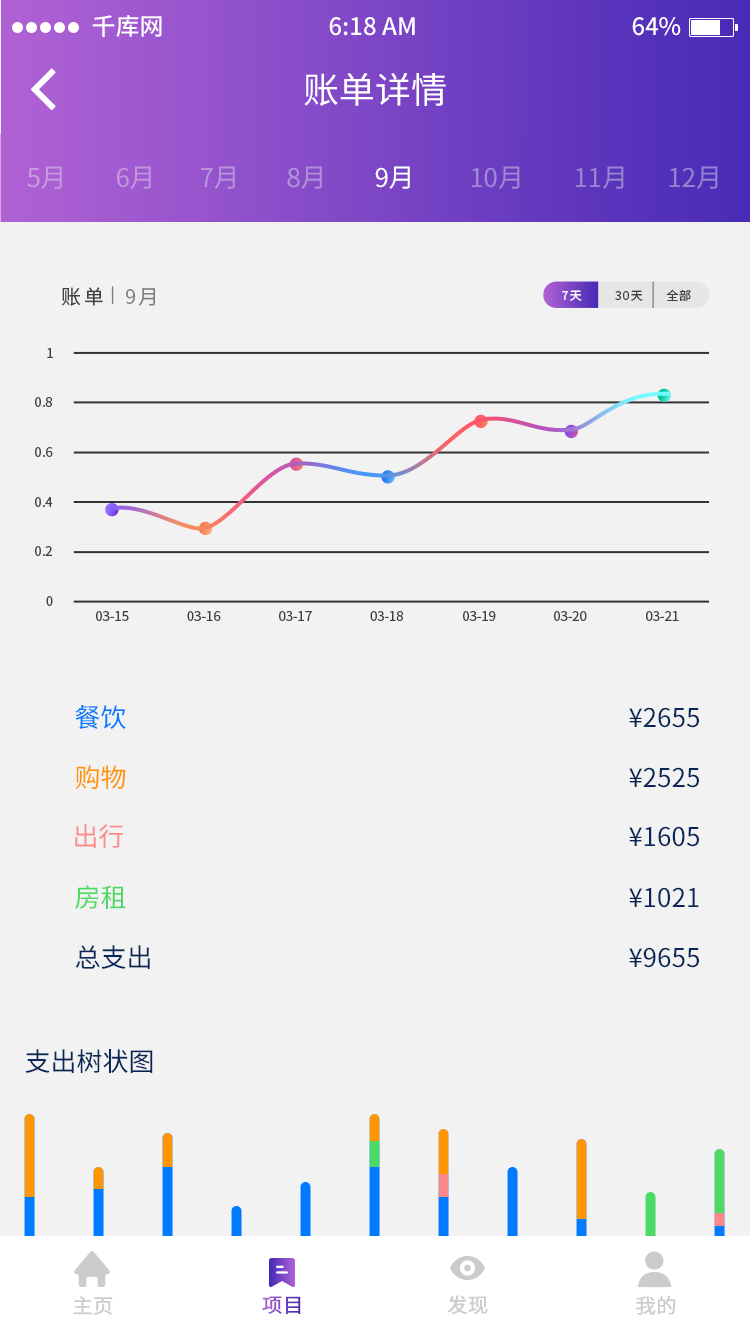
<style>
.page{position:relative;width:750px;height:1334px;background:#f2f2f2}
.page>*{position:absolute;margin:0}
.t1{font:36px "NotoSansHans-Regular";color:#ffffff}
.t2{font:26px "NotoSansHans-Regular";color:#c79ae1}
.t3{font:26px "NotoSansHans-Regular";color:#bf97df}
.t4{font:26px "NotoSansHans-Regular";color:#b893dc}
.t5{font:26px "NotoSansHans-Regular";color:#b090da}
.t6{font:26px "NotoSansHans-Regular";color:#ffffff}
.t7{font:26px "NotoSansHans-Regular";color:#a089d4}
.t8{font:26px "NotoSansHans-Regular";color:#9886d2}
.t9{font:26px "NotoSansHans-Regular";color:#9283d0}
.t10{font:20.1px "NotoSansHans-Regular";letter-spacing:0.11em;color:#404040}
.t11{font:20.1px "NotoSansHans-Regular";letter-spacing:0.11em;color:#808080}
.t12{font:12px "NotoSansHans-Regular";letter-spacing:0.09em;color:#ffffff}
.t13{font:12px "NotoSansHans-Regular";letter-spacing:0.09em;color:#404040}
.t14{font:13.4px "NotoSansHans-Regular";letter-spacing:-0.01em;color:#404040}
.t15{font:26px "NotoSansHans-Regular";color:#007aff}
.t16{font:26px "NotoSansHans-Regular";color:#082759}
.t17{font:26px "NotoSansHans-Regular";color:#ff9502}
.t18{font:26px "NotoSansHans-Regular";color:#fd8888}
.t19{font:26px "NotoSansHans-Regular";color:#4cda64}
.t20{font:20px "NotoSansHans-Regular";color:#cccccc;font-weight:bold}
.t21{font:20px "NotoSansHans-Regular";font-weight:bold}
</style>
<div class="page">
<p class="t1" style="left:304px;top:72px;width:142px;height:34px">账单详情</p>
<p class="t2" style="left:27px;top:166px;width:35px;height:23px">5月</p>
<p class="t3" style="left:117px;top:166px;width:34px;height:23px">6月</p>
<p class="t4" style="left:201px;top:166px;width:34px;height:23px">7月</p>
<p class="t5" style="left:287px;top:166px;width:35px;height:23px">8月</p>
<p class="t6" style="left:375px;top:166px;width:35px;height:23px">9月</p>
<p class="t7" style="left:471px;top:166px;width:49px;height:23px">10月</p>
<p class="t8" style="left:575px;top:166px;width:49px;height:23px">11月</p>
<p class="t9" style="left:669px;top:166px;width:49px;height:23px">12月</p>
<p class="t10" style="left:61px;top:287px;width:42px;height:19px">账单</p>
<p class="t11" style="left:126px;top:288px;width:29px;height:18px">9月</p>
<p class="t12" style="left:562px;top:290px;width:20px;height:11px">7天</p>
<p class="t13" style="left:615px;top:290px;width:28px;height:11px">30天</p>
<p class="t13" style="left:666px;top:289px;width:25px;height:12px">全部</p>
<p class="t14" style="left:47px;top:348px;width:6px;height:10px">1</p>
<p class="t14" style="left:35px;top:397px;width:17px;height:10px">0.8</p>
<p class="t14" style="left:35px;top:447px;width:18px;height:10px">0.6</p>
<p class="t14" style="left:35px;top:497px;width:18px;height:10px">0.4</p>
<p class="t14" style="left:35px;top:546px;width:17px;height:10px">0.2</p>
<p class="t14" style="left:46px;top:596px;width:7px;height:10px">0</p>
<p class="t14" style="left:96px;top:611px;width:33px;height:10px">03-15</p>
<p class="t14" style="left:187px;top:611px;width:34px;height:10px">03-16</p>
<p class="t14" style="left:279px;top:611px;width:33px;height:10px">03-17</p>
<p class="t14" style="left:370px;top:611px;width:33px;height:10px">03-18</p>
<p class="t14" style="left:463px;top:611px;width:33px;height:10px">03-19</p>
<p class="t14" style="left:554px;top:611px;width:33px;height:10px">03-20</p>
<p class="t14" style="left:646px;top:611px;width:33px;height:10px">03-21</p>
<p class="t15" style="left:75px;top:705px;width:51px;height:24px">餐饮</p>
<p class="t16" style="left:629px;top:707px;width:70px;height:21px">¥2655</p>
<p class="t17" style="left:75px;top:765px;width:51px;height:24px">购物</p>
<p class="t16" style="left:629px;top:767px;width:70px;height:21px">¥2525</p>
<p class="t18" style="left:75px;top:824px;width:48px;height:24px">出行</p>
<p class="t16" style="left:629px;top:826px;width:70px;height:21px">¥1605</p>
<p class="t19" style="left:75px;top:885px;width:51px;height:24px">房租</p>
<p class="t16" style="left:629px;top:887px;width:70px;height:21px">¥1021</p>
<p class="t16" style="left:75px;top:945px;width:75px;height:24px">总支出</p>
<p class="t16" style="left:629px;top:947px;width:70px;height:21px">¥9655</p>
<p class="t16" style="left:25px;top:1049px;width:128px;height:24px">支出树状图</p>
<p class="t20" style="left:73px;top:1296px;width:40px;height:19px">主页</p>
<p class="t21" style="left:262px;top:1296px;width:39px;height:18px">项目</p>
<p class="t20" style="left:447px;top:1295px;width:41px;height:19px">发现</p>
<p class="t20" style="left:636px;top:1296px;width:40px;height:19px">我的</p>
</div>
